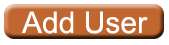
<style>
.page{position:relative;width:169px;height:45px;background:#ffffff}
.page>*{position:absolute;margin:0}
.t1{font:30px "ArialMT";color:#ffffff}
</style>
<div class="page">
<p class="t1" style="left:21px;top:11px;width:127px;height:23px">Add User</p>
</div>
